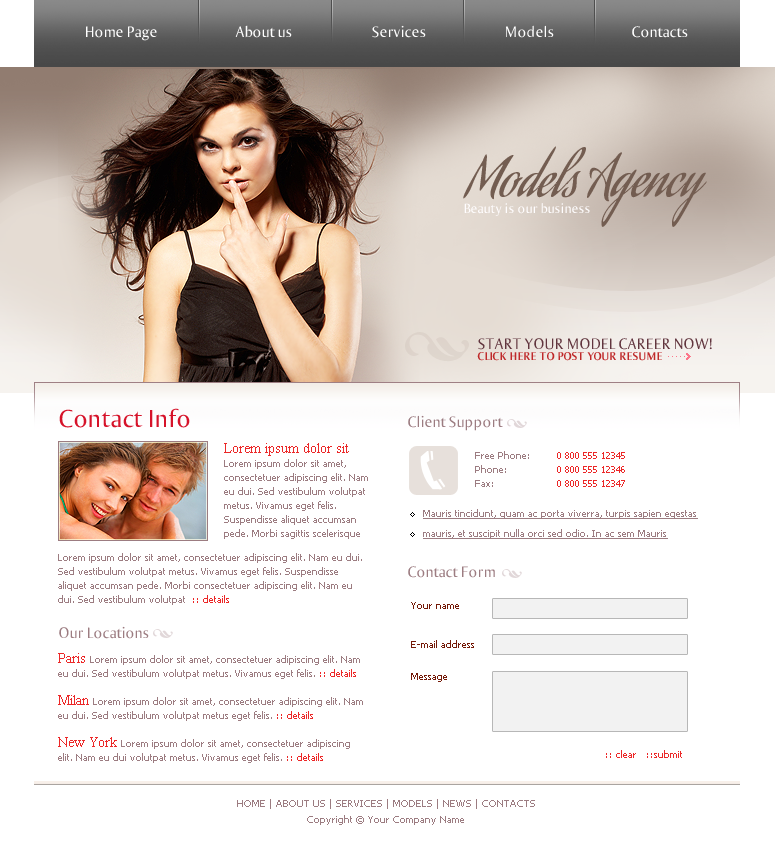
<style>
.page{position:relative;width:775px;height:850px;background:#ffffff}
.page>*{position:absolute;margin:0}
.t1{font:16px "Ogirema";color:#ffffff}
.t2{font:53.3px "AguafinaScript";color:#735d51}
.t3{font:14px "Ogirema";color:#fffdfe}
.t4{font:16px "Ogirema";color:#61353e}
.t5{font:12px "OgiremaBold";color:#bf292a}
.t6{font:26px "Ogirema";color:#d6132a}
.t7{font:16px "Ogirema";color:#9c7c81}
.t8{font:10px/14px "Tahoma";color:#9c7c81}
.t9{font:14px/12px "TimesNewRomanPSMT";color:#ec2828}
.t10{font:10px/14px "Tahoma";color:#ec2828}
.t11{font:10px/20px "Tahoma";color:#9c7c81;text-decoration:underline}
.t12{font:10px "Tahoma";color:#741907}
.t13{font:10px "Tahoma";color:#ec2828}
.t14{font:10px/16px "Tahoma";color:#9c7c81}
</style>
<div class="page">
<p class="t1" style="left:86px;top:26px;width:71px;height:15px">Home Page</p>
<p class="t1" style="left:235px;top:25px;width:57px;height:13px">About us</p>
<p class="t1" style="left:372px;top:25px;width:54px;height:13px">Services</p>
<p class="t1" style="left:506px;top:25px;width:48px;height:13px">Models</p>
<p class="t1" style="left:632px;top:26px;width:56px;height:12px">Contacts</p>
<p class="t2" style="left:463px;top:146px;width:244px;height:81px">Models Agency</p>
<p class="t3" style="left:464px;top:203px;width:126px;height:13px">Beauty is our business</p>
<p class="t4" style="left:478px;top:338px;width:234px;height:12px">START YOUR MODEL CAREER NOW!</p>
<p class="t5" style="left:477px;top:352px;width:185px;height:9px">CLICK HERE TO POST YOUR RESUME</p>
<p class="t6" style="left:59px;top:408px;width:131px;height:20px">Contact Info</p>
<p class="t7" style="left:408px;top:415px;width:95px;height:16px">Client Support</p>
<p class="t8" style="left:224px;top:443px;width:144px;height:96px"><span class="t9">Lorem ipsum dolor sit </span><br>Lorem ipsum dolor sit amet, consectetuer adipiscing elit. Nam eu dui. Sed vestibulum volutpat metus. Vivamus eget felis. Suspendisse aliquet accumsan pede. Morbi sagittis scelerisque</p>
<p class="t8" style="left:475px;top:451px;width:54px;height:36px">Free Phone:<br>Phone:<br>Fax:</p>
<p class="t10" style="left:557px;top:452px;width:68px;height:35px;text-align:right">0 800 555 12345<br>0 800 555 12346<br>0 800 555 12347</p>
<p class="t11" style="left:423px;top:509px;width:275px;height:30px">Mauris tincidunt, quam ac porta viverra, turpis sapien egestas mauris, et suscipit nulla orci sed odio. In ac sem Mauris</p>
<p class="t8" style="left:58px;top:553px;width:304px;height:52px">Lorem ipsum dolor sit amet, consectetuer adipiscing elit. Nam eu dui. Sed vestibulum volutpat metus. Vivamus eget felis. Suspendisse aliquet accumsan pede. Morbi consectetuer adipiscing elit. Nam eu dui. Sed vestibulum volutpat  <span class="t10">:: details</span></p>
<p class="t7" style="left:408px;top:566px;width:87px;height:12px">Contact Form</p>
<p class="t12" style="left:411px;top:602px;width:48px;height:7px">Your name</p>
<p class="t7" style="left:59px;top:626px;width:90px;height:13px">Our Locations</p>
<p class="t12" style="left:411px;top:640px;width:63px;height:8px">E-mail address</p>
<p class="t8" style="left:58px;top:653px;width:305px;height:110px"><span class="t9">Paris </span>Lorem ipsum dolor sit amet, consectetuer adipiscing elit. Nam eu dui. Sed vestibulum volutpat metus. Vivamus eget felis. <span class="t10">:: details<br><br></span><span class="t9">Milan </span>Lorem ipsum dolor sit amet, consectetuer adipiscing elit. Nam eu dui. Sed vestibulum volutpat metus eget felis. <span class="t10">:: details<br><br></span><span class="t9">New York </span>Lorem ipsum dolor sit amet, consectetuer adipiscing elit. Nam eu dui volutpat metus. Vivamus eget felis. <span class="t10">:: details</span></p>
<p class="t12" style="left:411px;top:673px;width:36px;height:9px">Message</p>
<p class="t13" style="left:606px;top:750px;width:76px;height:8px">:: clear   ::submit</p>
<p class="t14" style="left:237px;top:799px;width:298px;height:26px;text-align:center">HOME | ABOUT US | SERVICES | MODELS | NEWS | CONTACTS<br>Copyright © Your Company Name</p>
</div>
